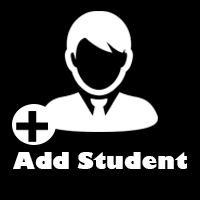
<style>
.page{position:relative;width:200px;height:200px;background:#000000}
.page>*{position:absolute;margin:0}
.t1{font:22.2px "GillSans-UltraBold";color:#ffffff}
</style>
<div class="page">
<p class="t1" style="left:13px;top:152px;width:174px;height:17px">Add Student</p>
</div>
